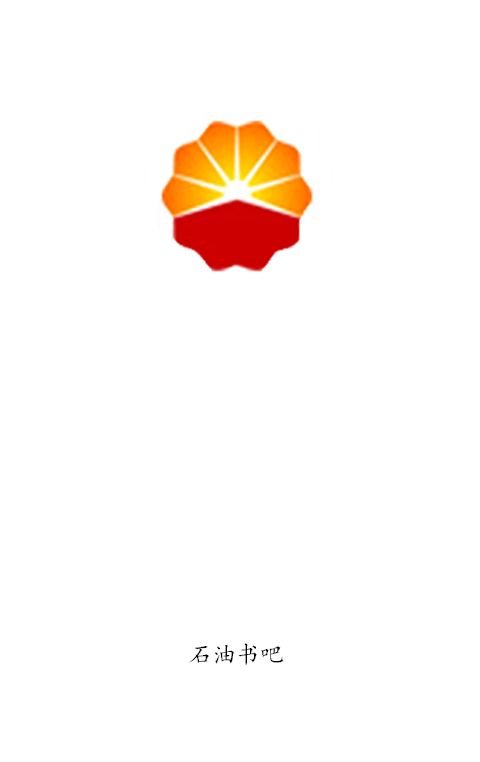
<style>
.page{position:relative;width:480px;height:762px;background:#ffffff}
.page>*{position:absolute;margin:0}
.t1{font:24px "¿¬Ìå";color:#000000}
</style>
<div class="page">
<p class="t1" style="left:189px;top:643px;width:94px;height:22px">石油书吧</p>
</div>
